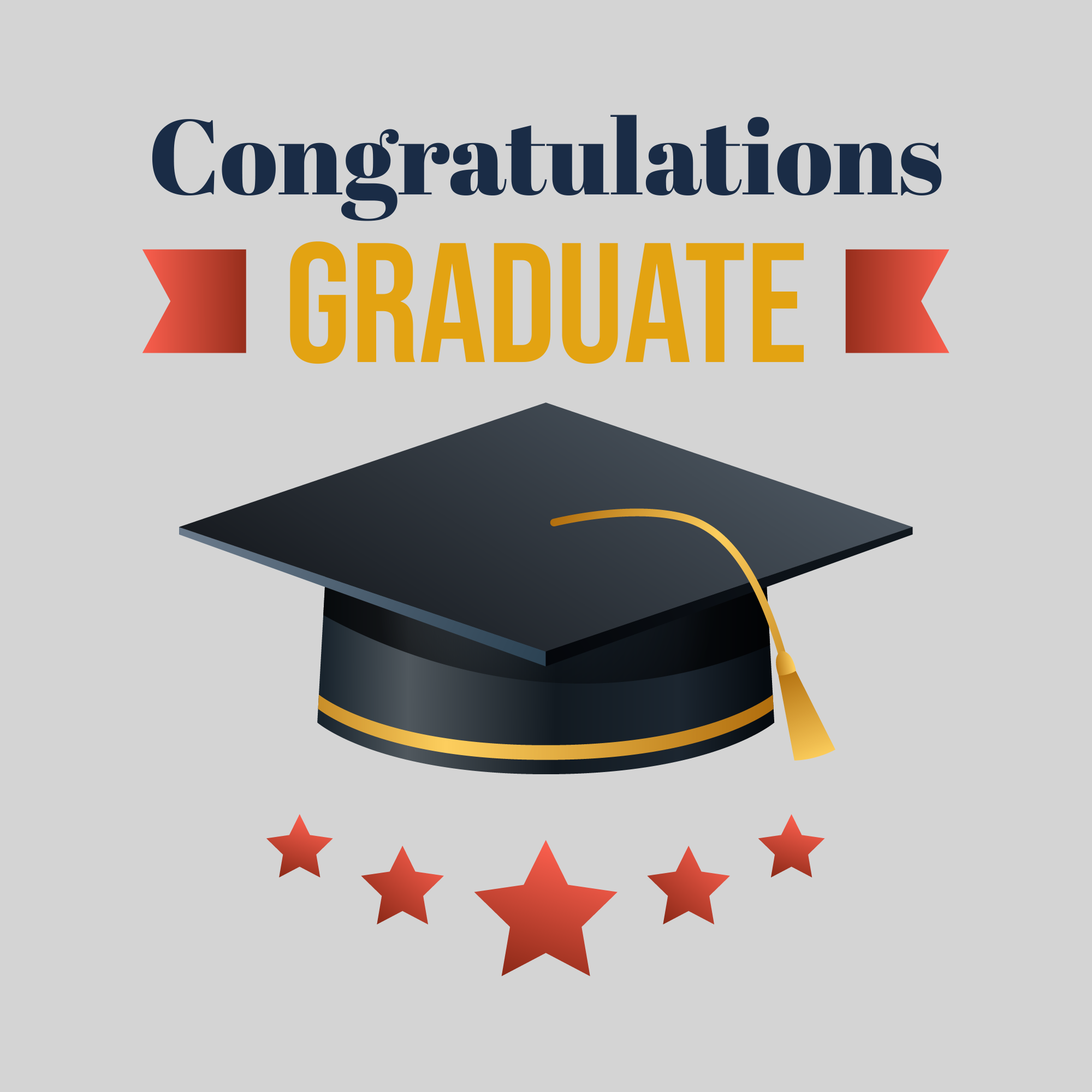
<style>
.page{position:relative;width:1092px;height:1092px;background:#d4d4d4}
.page>*{position:absolute;margin:0}
.t1{font:105.7px "AbrilFatface-Regular";color:#1b2c47}
.t2{font:169.7px "BebasNeue-Regular";color:#e3a312}
</style>
<div class="page">
<p class="t1" style="left:152px;top:115px;width:790px;height:106px">Congratulations</p>
<p class="t2" style="left:290px;top:241px;width:514px;height:123px">GRADUATE</p>
</div>
